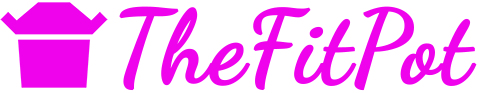
<style>
.page{position:relative;width:500px;height:93px;background:#ffffff}
.page>*{position:absolute;margin:0}
.t1{font:100px "DancingScript-Regular";color:#ef03ec;font-weight:bold}
</style>
<div class="page">
<p class="t1" style="left:119px;top:6px;width:358px;height:85px">TheFitPot</p>
</div>
